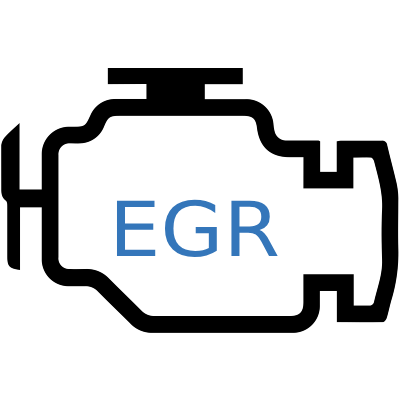
<style>
.page{position:relative;width:400px;height:400px;background:#ffffff}
.page>*{position:absolute;margin:0}
.t1{font:75.8px "DejaVuSans";color:#3476ba;scale:1.07 1}
</style>
<div class="page">
<p class="t1" style="left:116px;top:199px;width:162px;height:59px">EGR</p>
</div>
